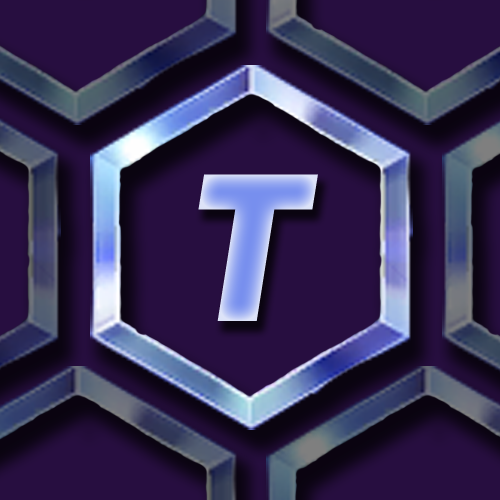
<style>
.page{position:relative;width:500px;height:500px;background:#270e40}
.page>*{position:absolute;margin:0}
.t1{font:200px "Exo-BlackItalic"}
</style>
<div class="page">
<p class="t1" style="left:198px;top:174px;width:120px;height:147px">T</p>
</div>
